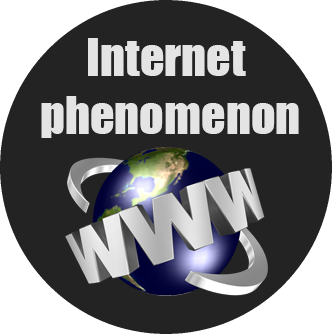
<style>
.page{position:relative;width:332px;height:334px;background:#232323}
.page>*{position:absolute;margin:0}
.t1{font:48px "Impact";color:#e4e4e4}
</style>
<div class="page">
<p class="t1" style="left:41px;top:38px;width:258px;height:100px;text-align:center">Internet <br>phenomenon</p>
</div>
